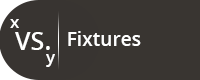
<style>
.page{position:relative;width:200px;height:80px;background:#393531}
.page>*{position:absolute;margin:0}
.t1{font:16.7px "OpenSans-Semibold";color:#ffffff}
.t2{font:25px "OpenSans-Semibold";color:#ffffff}
.t3{font:19.2px "OpenSans-Semibold";color:#ffffff}
</style>
<div class="page">
<p class="t1" style="left:10px;top:19px;width:9px;height:9px">x</p>
<p class="t2" style="left:15px;top:32px;width:35px;height:18px">VS.</p>
<p class="t3" style="left:68px;top:31px;width:73px;height:15px">Fixtures</p>
<p class="t1" style="left:46px;top:54px;width:9px;height:13px">y</p>
</div>
